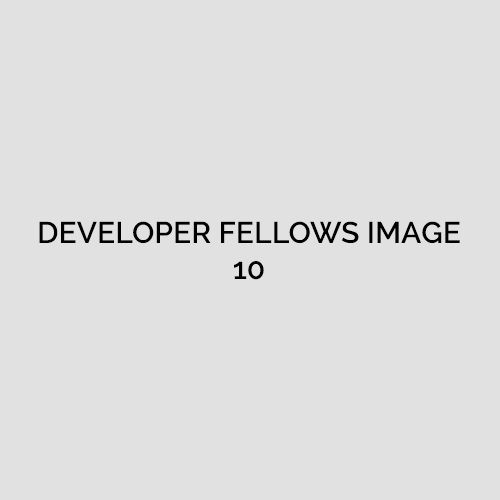
<style>
.page{position:relative;width:500px;height:500px;background:#e1e1e1}
.page>*{position:absolute;margin:0}
.t1{font:30px "Raleway-SemiBold";color:#000000;text-transform:uppercase}
</style>
<div class="page">
<p class="t1" style="left:39px;top:221px;width:421px;height:59px;text-align:center">Developer Fellows image<br>10</p>
</div>
